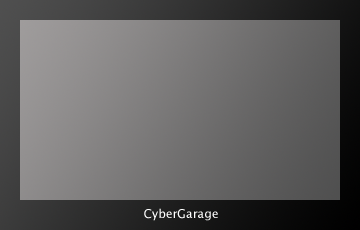
<style>
.page{position:relative;width:360px;height:230px}
.page>*{position:absolute;margin:0}
.t1{font:12px "LucidaSansUnicode";color:#ffffff}
</style>
<div class="page">
<p class="t1" style="left:144px;top:208px;width:74px;height:13px">CyberGarage</p>
</div>
